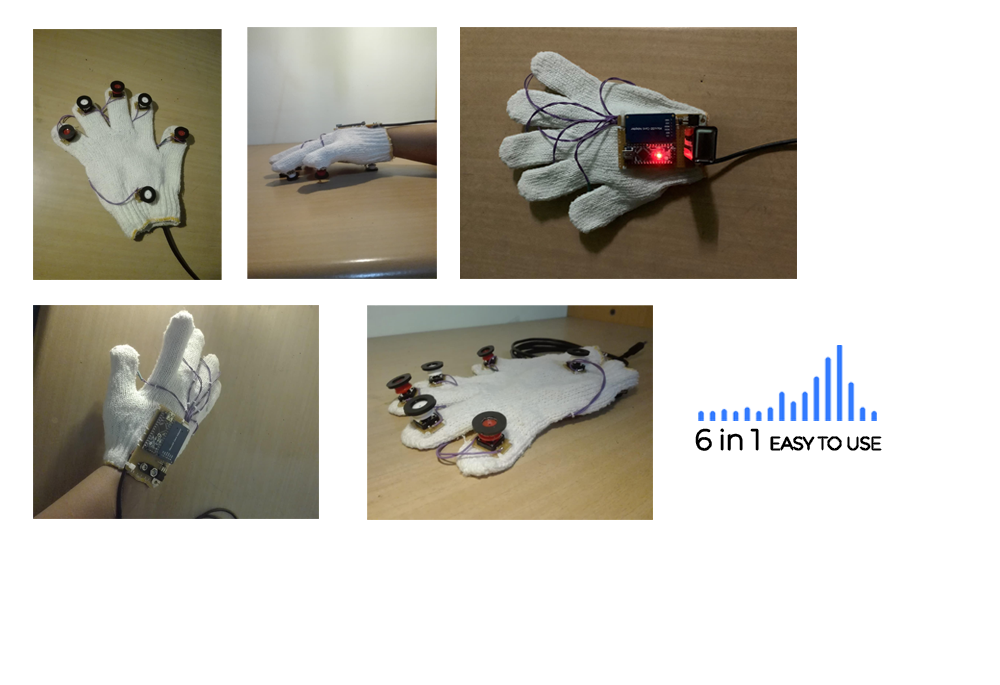
<style>
.page{position:relative;width:1000px;height:685px;background:#ffffff}
.page>*{position:absolute;margin:0}
.t1{font:28px "Montserrat-Thin";color:#000000}
.t2{font:17.3px "Montserrat-Thin";color:#000000}
</style>
<div class="page">
<p class="t1" style="left:696px;top:429px;width:62px;height:21px">6 in 1</p>
<p class="t2" style="left:771px;top:437px;width:110px;height:13px">EASY TO USE</p>
</div>
